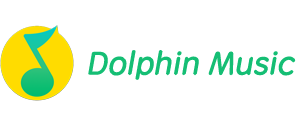
<style>
.page{position:relative;width:300px;height:125px;background:#ffffff}
.page>*{position:absolute;margin:0}
.t1{font:32px "STYuanti-SC-Regular";color:#15be74;font-weight:bold;font-style:italic}
</style>
<div class="page">
<p class="t1" style="left:88px;top:50px;width:208px;height:30px">Dolphin Music</p>
</div>
